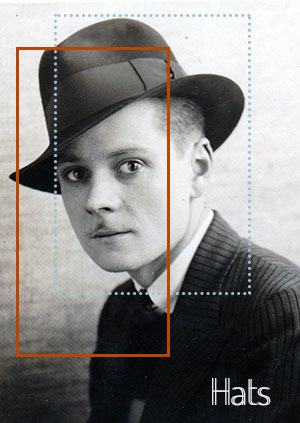
<style>
.page{position:relative;width:300px;height:423px}
.page>*{position:absolute;margin:0}
.t1{font:37px "Dosis-ExtraLight";color:#e6e8ef}
</style>
<div class="page">
<p class="t1" style="left:212px;top:378px;width:57px;height:28px">Hats</p>
<p class="t1" style="left:215px;top:378px;width:56px;height:28px">Hats</p>
</div>
